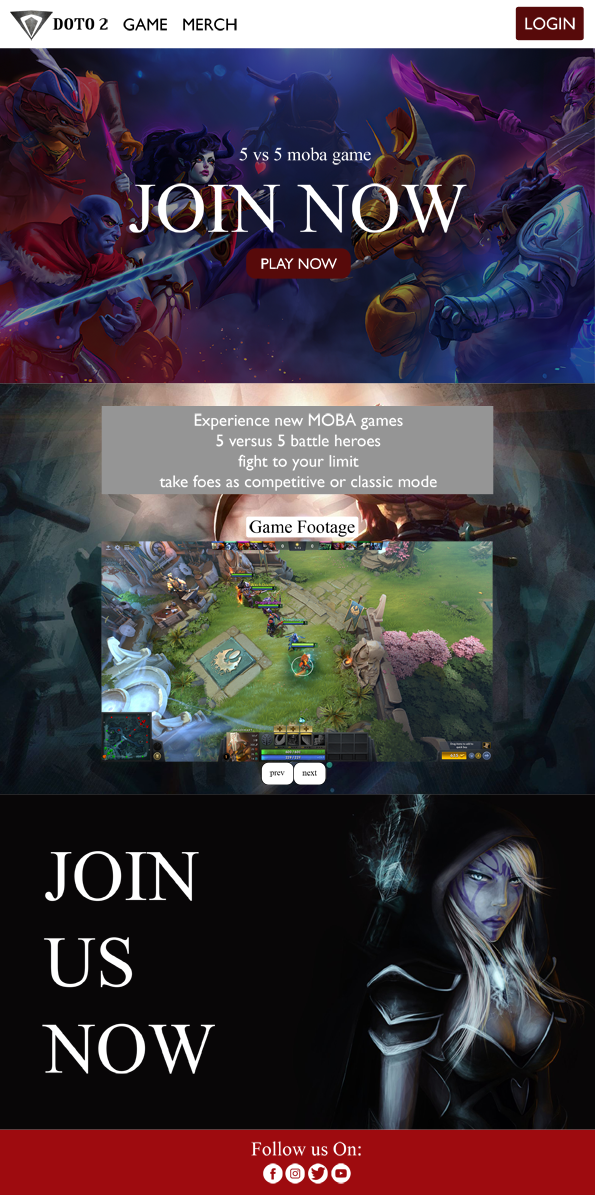
<style>
.page{position:relative;width:595px;height:1195px}
.page>*{position:absolute;margin:0}
.t1{font:16.5px "GillSansMT";color:#ffffff}
.t2{font:15px "BirchStd";color:#000000;scale:2.16 1}
.t3{font:16.5px "GillSansMT";color:#000000}
.t4{font:18.2px "TimesNewRomanPSMT";color:#ffffff}
.t5{font:70.6px "TimesNewRomanPSMT";color:#ffffff}
.t6{font:15px "GillSansMT";color:#ffffff}
.t7{font:17px "GillSansMT";color:#ffffff}
.t8{font:18px "TimesNewRomanPSMT";color:#000000}
.t9{font:8.1px "TimesNewRomanPSMT"}
.t10{font:71.9px "TimesNewRomanPSMT";color:#ffffff}
.t11{font:19.4px "TimesNewRomanPSMT";color:#ffffff}
</style>
<div class="page">
<p class="t1" style="left:525px;top:17px;width:50px;height:13px">LOGIN</p>
<p class="t2" style="left:52px;top:18px;width:56px;height:12px">DOTO 2</p>
<p class="t3" style="left:123px;top:18px;width:44px;height:13px">GAME</p>
<p class="t3" style="left:183px;top:18px;width:54px;height:13px">MERCH</p>
<p class="t4" style="left:239px;top:147px;width:132px;height:18px">5 vs 5 moba game</p>
<p class="t5" style="left:129px;top:183px;width:338px;height:50px">JOIN NOW</p>
<p class="t6" style="left:261px;top:258px;width:76px;height:11px">PLAY NOW</p>
<p class="t7" style="left:159px;top:413px;width:278px;height:78px;text-align:center">Experience new MOBA games<br>5 versus 5 battle heroes<br>fight to your limit<br>take foes as competitive or classic mode</p>
<p class="t8" style="left:249px;top:520px;width:106px;height:17px">Game Footage</p>
<p class="t9" style="left:269px;top:771px;width:16px;height:6px">prev</p>
<p class="t9" style="left:302px;top:770px;width:15px;height:6px">next</p>
<p class="t10" style="left:42px;top:851px;width:173px;height:223px">JOIN<br>US<br>NOW</p>
<p class="t11" style="left:251px;top:1141px;width:110px;height:15px">Follow us On:</p>
</div>
